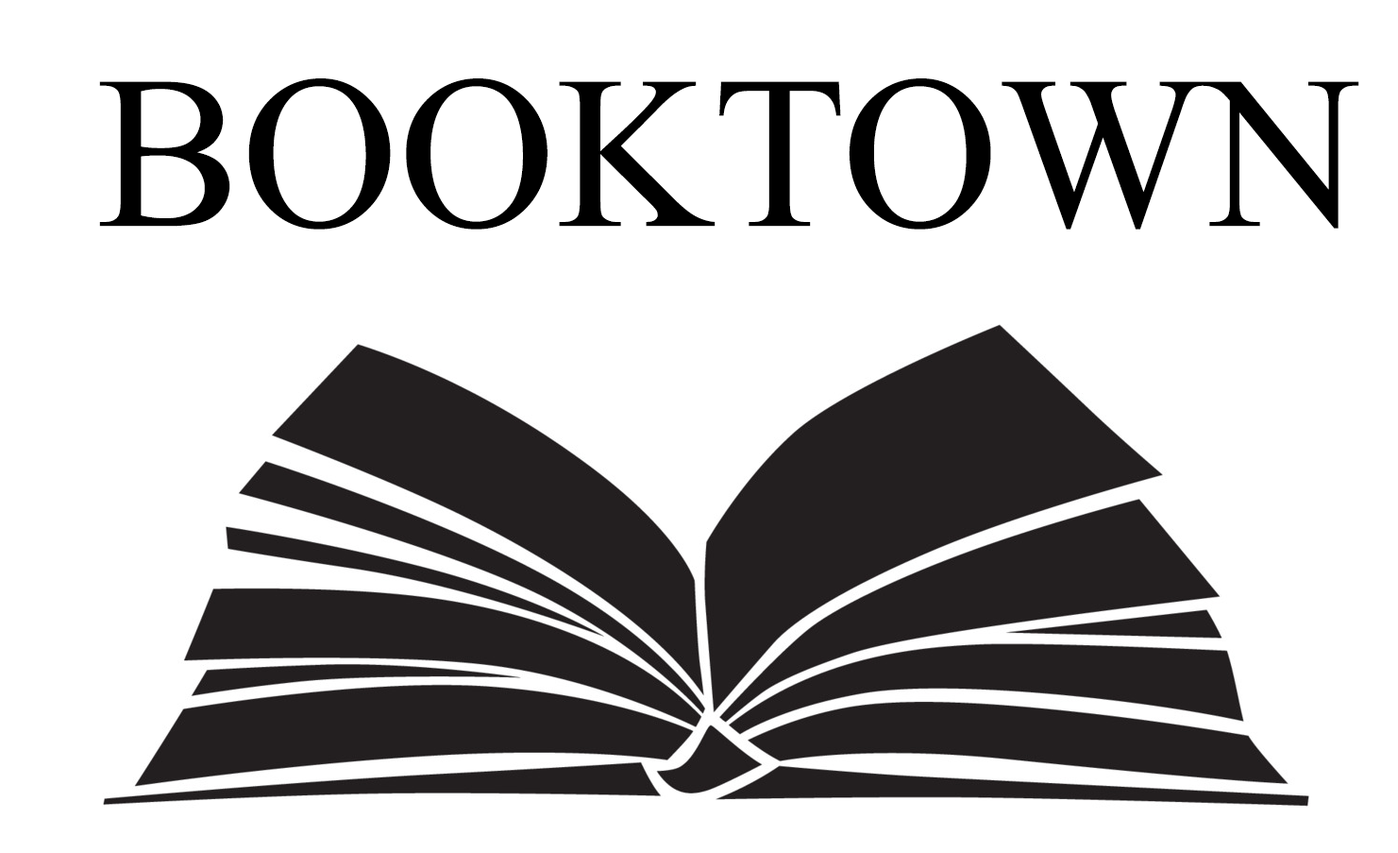
<style>
.page{position:relative;width:1398px;height:853px;background:#ffffff}
.page>*{position:absolute;margin:0}
.t1{font:217.7px "TimesNewRomanPSMT";color:#000000}
</style>
<div class="page">
<p class="t1" style="left:99px;top:78px;width:1261px;height:151px">BOOKTOWN</p>
</div>
